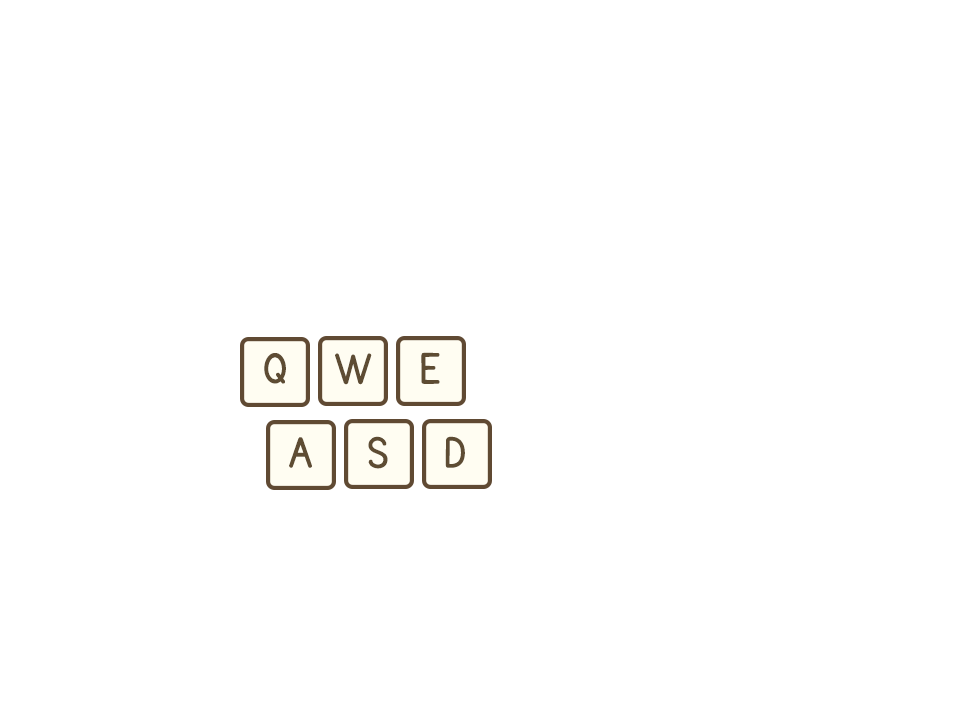
<style>
.page{position:relative;width:960px;height:720px;background:#ffffff}
.page>*{position:absolute;margin:0}
.t1{font:50px "KGPrimaryPenmanship2";color:#5e4c33}
</style>
<div class="page">
<p class="t1" style="left:264px;top:353px;width:22px;height:31px">Q</p>
<p class="t1" style="left:335px;top:353px;width:37px;height:32px">W</p>
<p class="t1" style="left:421px;top:352px;width:19px;height:32px">E</p>
<p class="t1" style="left:289px;top:437px;width:23px;height:31px">A</p>
<p class="t1" style="left:368px;top:436px;width:20px;height:33px">S</p>
<p class="t1" style="left:445px;top:436px;width:20px;height:32px">D</p>
</div>
